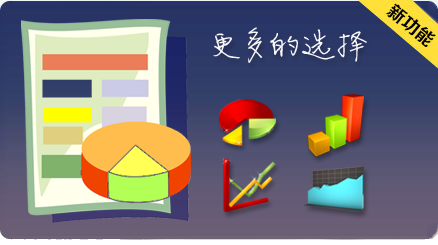
<style>
.page{position:relative;width:438px;height:245px}
.page>*{position:absolute;margin:0}
.t1{font:36px "FZJLJW--GB1-0";color:#f6f6f6}
</style>
<div class="page">
<p class="t1" style="left:213px;top:27px;width:154px;height:36px">更多的选择</p>
</div>
